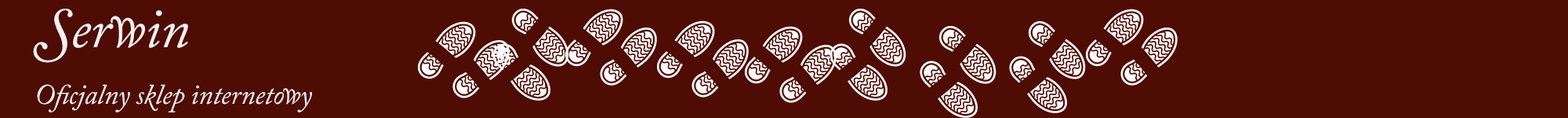
<style>
.page{position:relative;width:1568px;height:118px;background:#4e0c05}
.page>*{position:absolute;margin:0}
.t1{font:28.2px/18.8px "ACaslonPro-Italic";letter-spacing:-0.01em;color:#f5efee}
.t2{font:56.4px/18.8px "ACaslonPro-Italic";letter-spacing:-0.01em;color:#f5efee}
</style>
<div class="page">
<p class="t1" style="left:33px;top:9px;width:279px;height:103px"><span class="t2"><br>Serwin<br><br><br></span>Oficjalny sklep internetowy</p>
</div>
